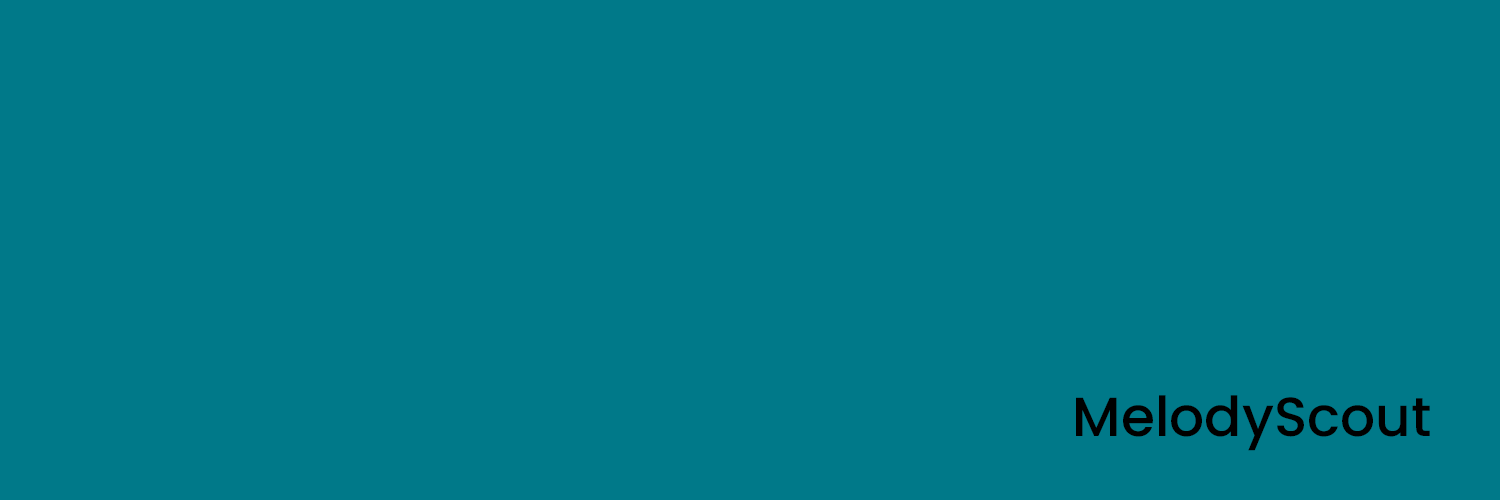
<style>
.page{position:relative;width:1500px;height:500px;background:#007989}
.page>*{position:absolute;margin:0}
.t1{font:55px "Poppins-Medium";color:#000000}
</style>
<div class="page">
<p class="t1" style="left:1076px;top:395px;width:354px;height:56px">MelodyScout</p>
</div>
